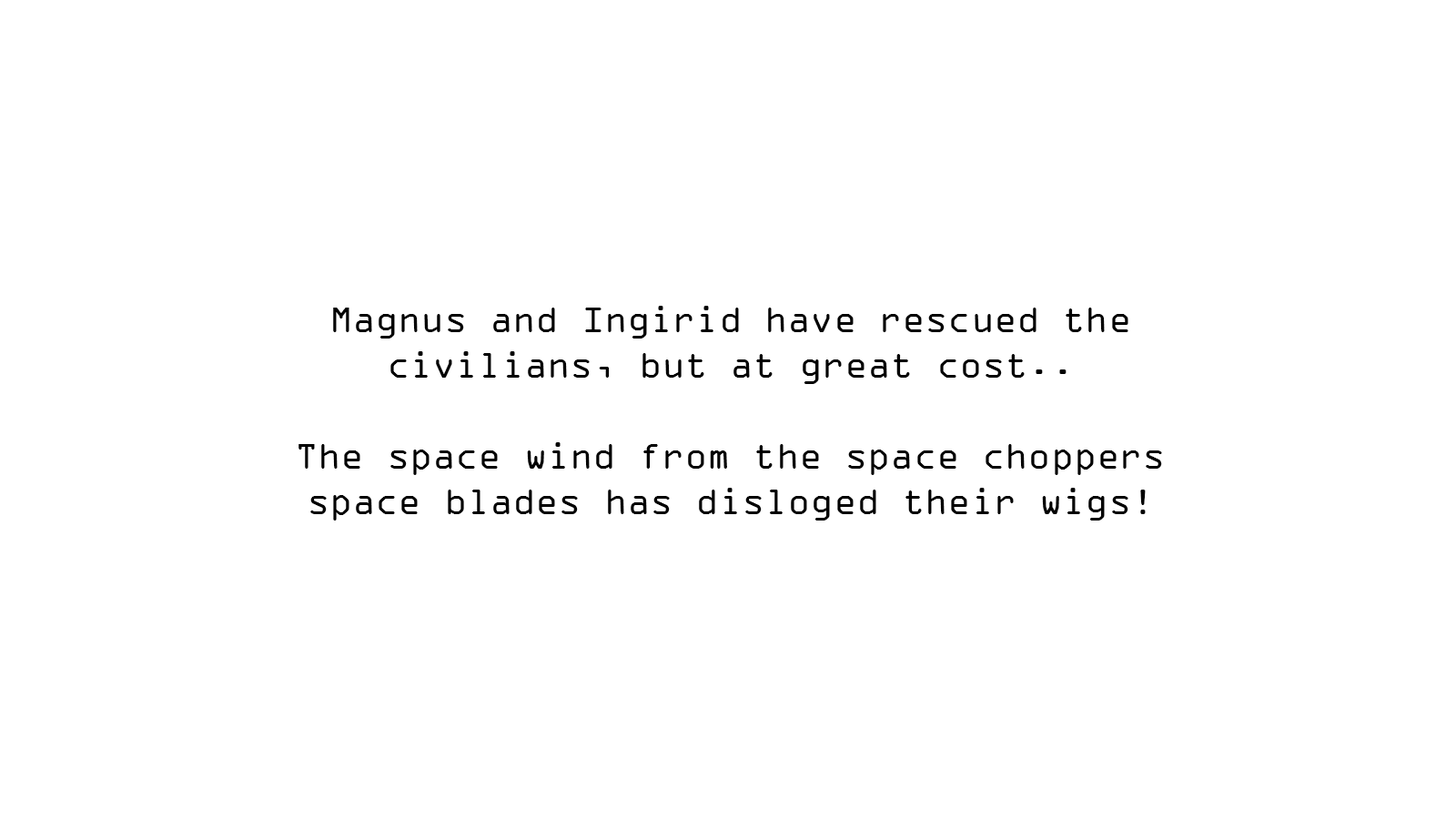
<style>
.page{position:relative;width:1456px;height:819px;background:#ffffff}
.page>*{position:absolute;margin:0}
.t1{font:37.9px "OCRAExtended";color:#000000}
</style>
<div class="page">
<p class="t1" style="left:298px;top:306px;width:864px;height:215px;text-align:center">Magnus and Ingirid have rescued the civilians, but at great cost.. <br><br>The space wind from the space choppers space blades has disloged their wigs!</p>
</div>
